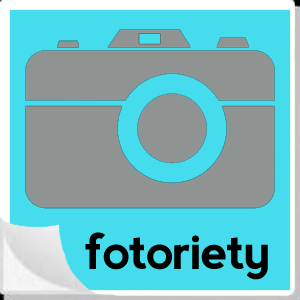
<style>
.page{position:relative;width:300px;height:300px;background:#45dced}
.page>*{position:absolute;margin:0}
.t1{font:50px "nevis-Bold";letter-spacing:-0.04em;color:#000000}
</style>
<div class="page">
<p class="t1" style="left:85px;top:232px;width:183px;height:48px">fotoriety</p>
</div>
